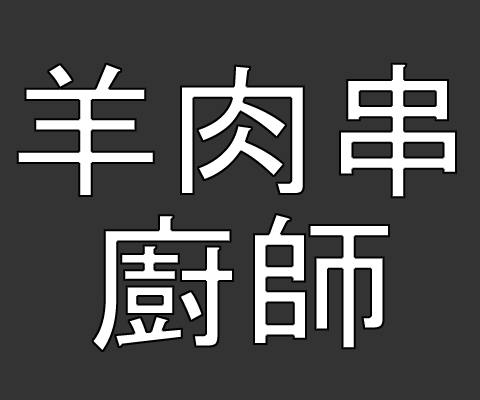
<style>
.page{position:relative;width:480px;height:400px;background:#333333}
.page>*{position:absolute;margin:0}
.t1{font:148.2px/151.8px "MS-Gothic";color:#ffffff;scale:1.05 1}
</style>
<div class="page">
<p class="t1" style="left:17px;top:63px;width:439px;height:288px;text-align:center">羊肉串<br>廚師</p>
</div>
